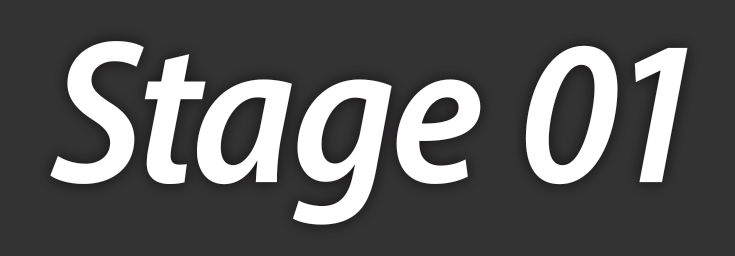
<style>
.page{position:relative;width:735px;height:256px;background:#333333}
.page>*{position:absolute;margin:0}
.t1{font:206.2px "MyriadConceptItalic-SemiboldSemiCondensedItalic";color:#ffffff}
</style>
<div class="page">
<p class="t1" style="left:50px;top:41px;width:638px;height:184px">Stage 01</p>
</div>
